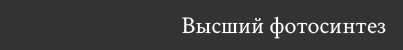
<style>
.page{position:relative;width:403px;height:50px;background:#333333}
.page>*{position:absolute;margin:0}
.t1{font:24px "CrimsonText-Regular";color:#ffffff}
</style>
<div class="page">
<p class="t1" style="left:182px;top:16px;width:204px;height:23px">Высший фотосинтез</p>
</div>
